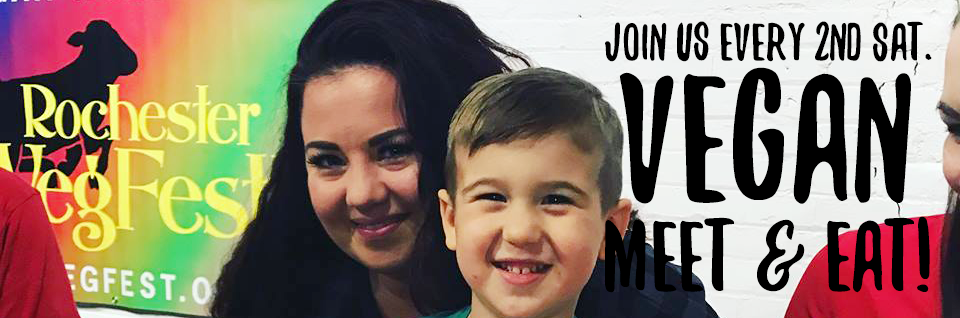
<style>
.page{position:relative;width:960px;height:318px}
.page>*{position:absolute;margin:0}
.t1{font:58.4px/25px "YeahPapa";color:#000000}
.t2{font:200px/140px "YeahPapa";color:#000000}
.t3{font:110px/90px "YeahPapa";color:#000000}
</style>
<div class="page">
<p class="t1" style="left:604px;top:21px;width:328px;height:272px;text-align:center">Join Us EVERY 2nd SAT. <br><span class="t2">VEGAN<br></span><span class="t3">MEET &amp; EAT!</span></p>
</div>
